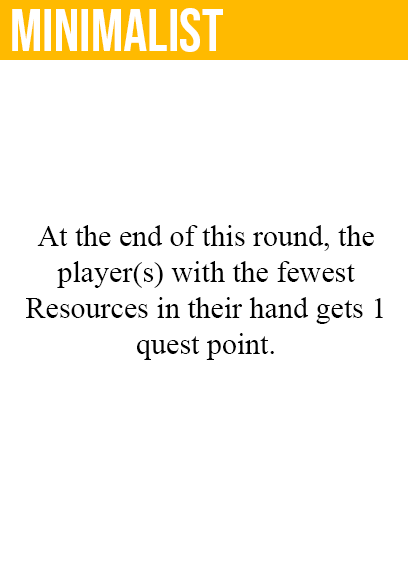
<style>
.page{position:relative;width:408px;height:585px;background:#ffffff}
.page>*{position:absolute;margin:0}
.t1{font:60px "BebasNeue-Regular";color:#ffffff}
.t2{font:30px "TimesNewRomanPSMT";color:#000000}
</style>
<div class="page">
<p class="t1" style="left:12px;top:8px;width:211px;height:44px">minimalist</p>
<p class="t2" style="left:26px;top:225px;width:357px;height:135px;text-align:center">At the end of this round, the<br>player(s) with the fewest<br>Resources in their hand gets 1<br>quest point.</p>
</div>
